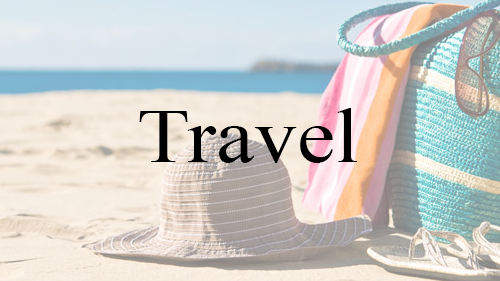
<style>
.page{position:relative;width:500px;height:281px}
.page>*{position:absolute;margin:0}
.t1{font:77.4px "TimesNewRomanPSMT";color:#000000;scale:1.11 1}
</style>
<div class="page">
<p class="t1" style="left:139px;top:108px;width:219px;height:55px">Travel</p>
</div>
